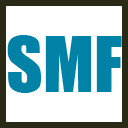
<style>
.page{position:relative;width:128px;height:128px;background:#ffffff}
.page>*{position:absolute;margin:0}
.t1{font:71.3px "Impact";color:#0081a6}
</style>
<div class="page">
<p class="t1" style="left:7px;top:35px;width:115px;height:58px">SMF</p>
</div>
